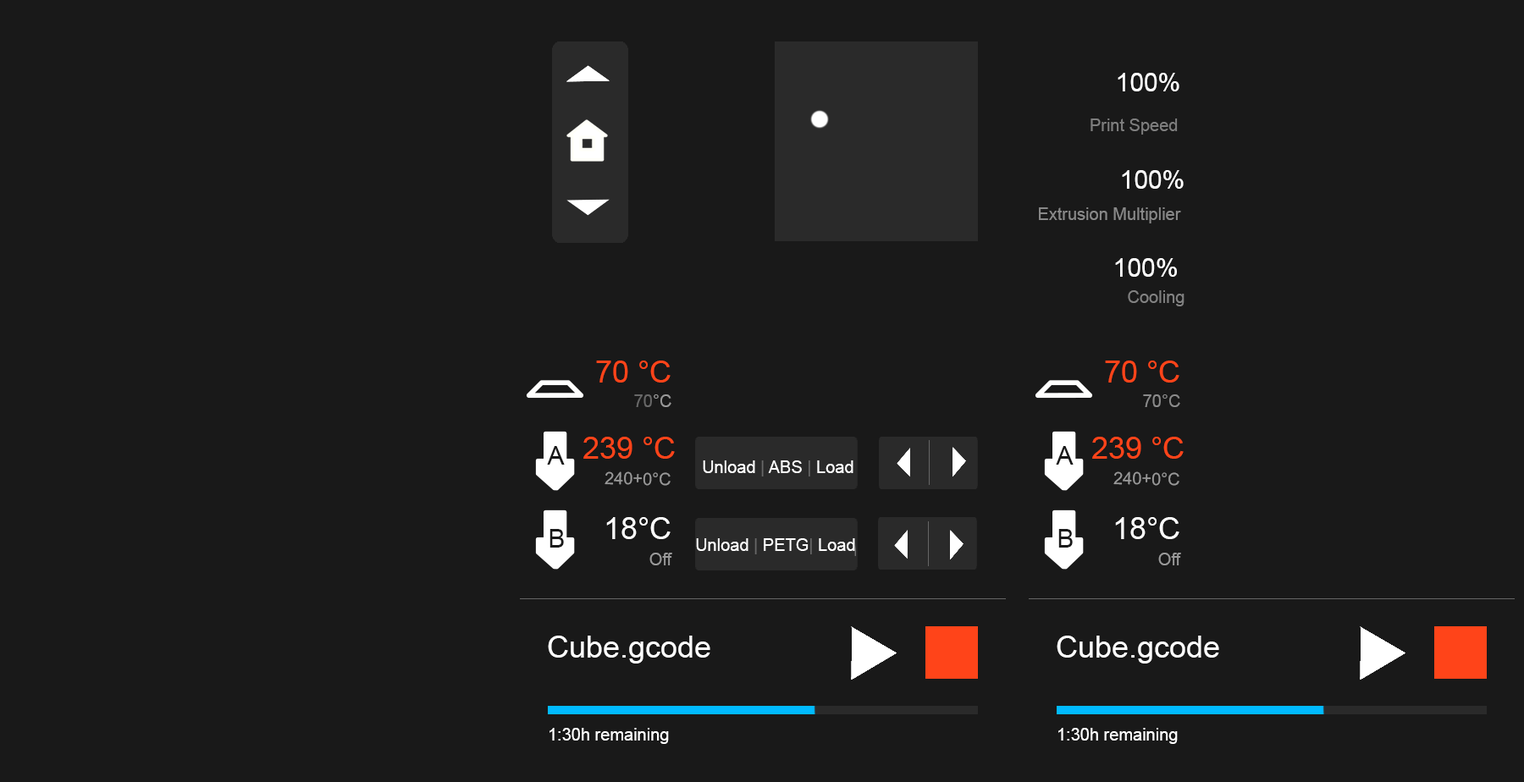
<style>
.page{position:relative;width:1524px;height:782px;background:#191919}
.page>*{position:absolute;margin:0}
.t1{font:25.4px "ArialMT";color:#ffffff}
.t2{font:16.9px "ArialMT";color:#7e7e7e}
.t3{font:16.9px "ArialMT";color:#888888}
.t4{font:16.9px "ArialMT";color:#818181}
.t5{font:30.5px "ArialMT";color:#ff4419}
.t6{font:16.9px "ArialMT";color:#686868}
.t7{font:16.9px "ArialMT";color:#999999}
.t8{font:16.9px "ArialMT";color:#8a8a8a}
.t9{font:25.4px "ArialMT";color:#191919}
.t10{font:16.9px "ArialMT";color:#ffffff}
.t11{font:16.9px "ArialMT";color:#676767}
.t12{font:30.5px "ArialMT";color:#ffffff}
.t13{font:16.9px "ArialMT";color:#fefefe}
</style>
<div class="page">
<p class="t1" style="left:1118px;top:73px;width:61px;height:18px">100%</p>
<p class="t2" style="left:1091px;top:119px;width:87px;height:16px">Print Speed</p>
<p class="t1" style="left:1122px;top:170px;width:62px;height:19px">100%</p>
<p class="t3" style="left:1039px;top:207px;width:142px;height:17px">Extrusion Multiplier</p>
<p class="t1" style="left:1115px;top:258px;width:62px;height:19px">100%</p>
<p class="t4" style="left:1128px;top:290px;width:57px;height:17px">Cooling</p>
<p class="t5" style="left:596px;top:361px;width:75px;height:22px">70 °C</p>
<p class="t5" style="left:1105px;top:361px;width:74px;height:22px">70 °C</p>
<p class="t6" style="left:634px;top:395px;width:37px;height:12px">70<span class="t7">°C</span></p>
<p class="t8" style="left:1143px;top:395px;width:37px;height:12px">70°C</p>
<p class="t5" style="left:583px;top:437px;width:92px;height:22px">239 °C</p>
<p class="t5" style="left:1092px;top:437px;width:92px;height:22px">239 °C</p>
<p class="t9" style="left:547px;top:446px;width:18px;height:19px">A</p>
<p class="t9" style="left:1056px;top:446px;width:18px;height:19px">A</p>
<p class="t10" style="left:703px;top:461px;width:151px;height:16px">Unload <span class="t11">| </span>ABS <span class="t11">| </span>Load</p>
<p class="t7" style="left:605px;top:472px;width:66px;height:14px;rotate:1deg">240+0°C</p>
<p class="t7" style="left:1113px;top:472px;width:66px;height:14px;rotate:1deg">240+0°C</p>
<p class="t12" style="left:606px;top:517px;width:65px;height:22px">18°C</p>
<p class="t12" style="left:1115px;top:517px;width:64px;height:22px">18°C</p>
<p class="t9" style="left:550px;top:529px;width:14px;height:19px">B</p>
<p class="t9" style="left:1058px;top:529px;width:15px;height:19px">B</p>
<p class="t10" style="left:696px;top:539px;width:159px;height:16px">Unload <span class="t11">|</span><span class="t13"> PETG</span><span class="t11">| </span>Load</p>
<p class="t7" style="left:649px;top:553px;width:23px;height:13px">Off</p>
<p class="t7" style="left:1158px;top:553px;width:23px;height:13px">Off</p>
<p class="t12" style="left:548px;top:636px;width:162px;height:28px">Cube.gcode</p>
<p class="t12" style="left:1057px;top:636px;width:162px;height:28px">Cube.gcode</p>
<p class="t10" style="left:550px;top:728px;width:119px;height:16px">1:30h remaining</p>
<p class="t10" style="left:1058px;top:728px;width:120px;height:16px">1:30h remaining</p>
</div>
